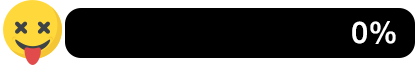
<style>
.page{position:relative;width:415px;height:65px;background:#000000}
.page>*{position:absolute;margin:0}
.t1{font:30px "HelveticaNeueCyr-Medium";color:#ffffff}
</style>
<div class="page">
<p class="t1" style="left:352px;top:21px;width:44px;height:23px">0%</p>
</div>
